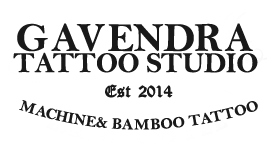
<style>
.page{position:relative;width:275px;height:153px;background:#ffffff}
.page>*{position:absolute;margin:0}
.t1{font:40.8px "BellMTBold";color:#191919}
.t2{font:28.8px "BellMTBold";color:#191919}
.t3{font:16.9px "OldEnglishTextMT";color:#191919;font-weight:bold}
.t4{font:15.6px "BellMTBold";color:#191919}
</style>
<div class="page">
<p class="t1" style="left:17px;top:23px;width:236px;height:29px">GAVENDRA</p>
<p class="t2" style="left:13px;top:52px;width:245px;height:21px">TATTOO STUDIO</p>
<p class="t3" style="left:105px;top:84px;width:68px;height:14px">Est  2014</p>
<p class="t4" style="left:19px;top:100px;width:239px;height:30px;text-align:center">MACHINE&amp; BAMBOO TATTOO</p>
</div>
